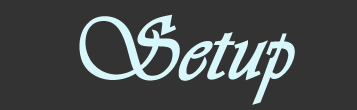
<style>
.page{position:relative;width:357px;height:110px;background:#333333}
.page>*{position:absolute;margin:0}
.t1{font:90px "Vivaldii";color:#daf9fc;font-weight:bold}
</style>
<div class="page">
<p class="t1" style="left:79px;top:14px;width:216px;height:91px">Setup</p>
</div>
